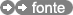
<style>
.page{position:relative;width:73px;height:15px;background:#808080}
.page>*{position:absolute;margin:0}
.t1{font:15px "ArialMT";color:#ffffff}
</style>
<div class="page">
<p class="t1" style="left:32px;top:1px;width:33px;height:12px">fonte</p>
</div>
